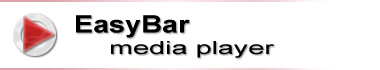
<style>
.page{position:relative;width:380px;height:70px;background:#ffffff}
.page>*{position:absolute;margin:0}
.t1{font:24px "Arial-BoldMT";color:#000000;scale:1.2 1}
.t2{font:18px "ArialMT";color:#000000;scale:1.6 1}
</style>
<div class="page">
<p class="t1" style="left:76px;top:15px;width:114px;height:23px">EasyBar</p>
<p class="t2" style="left:111px;top:41px;width:163px;height:17px">media player</p>
</div>
